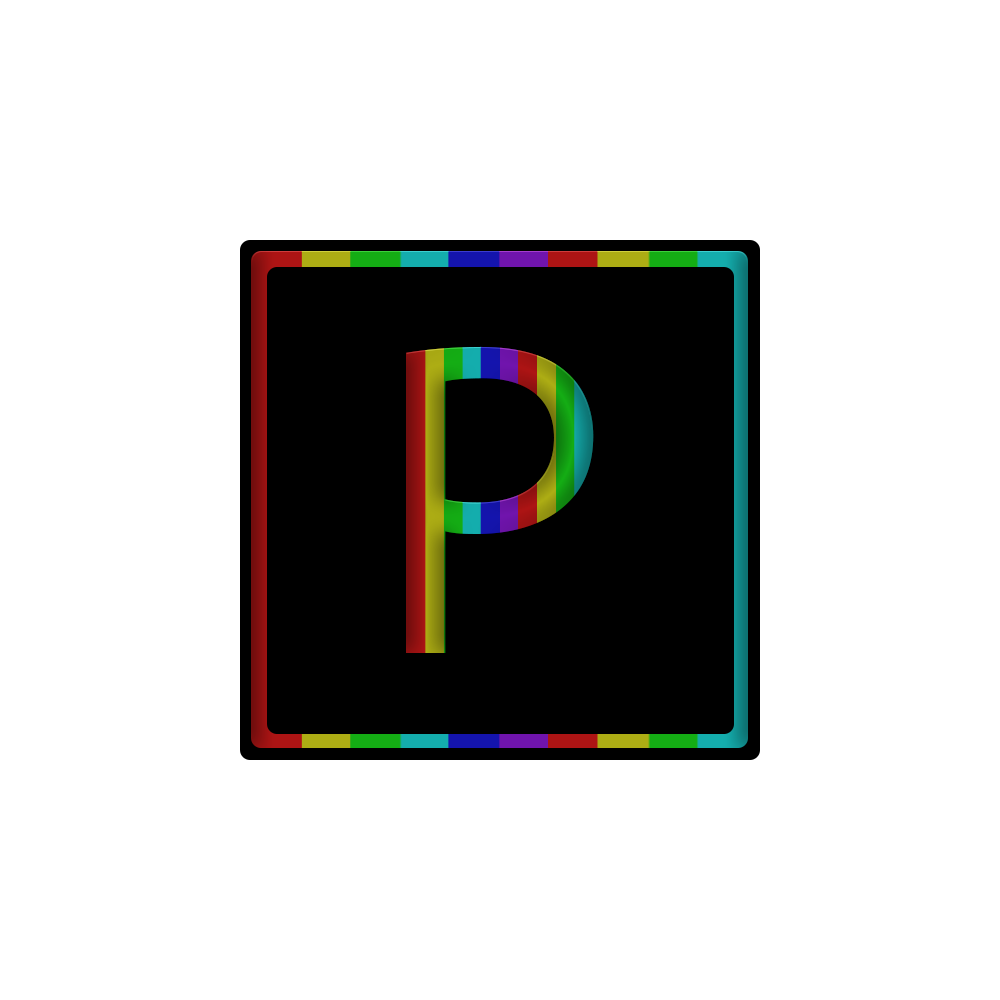
<style>
.page{position:relative;width:1000px;height:1000px;background:#ffffff}
.page>*{position:absolute;margin:0}
.t1{font:451.3px "MyriadPro-Regular"}
</style>
<div class="page">
<p class="t1" style="left:406px;top:346px;width:188px;height:307px">P</p>
</div>
